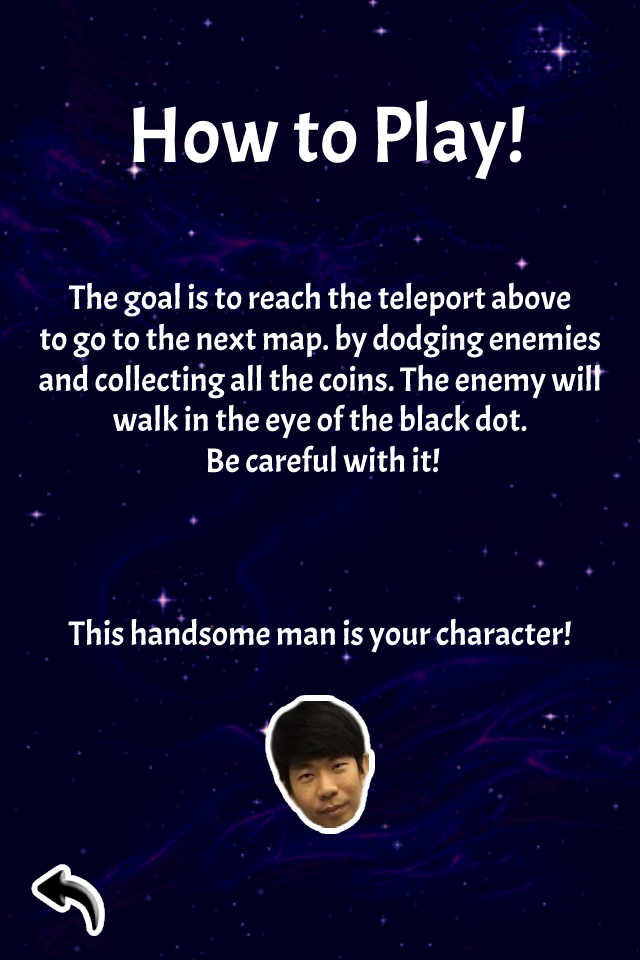
<style>
.page{position:relative;width:640px;height:960px;background:#000020}
.page>*{position:absolute;margin:0}
.t1{font:80px "Acme-Regular";color:#ffffff}
.t2{font:34px "Acme-Regular";color:#ffffff}
</style>
<div class="page">
<p class="t1" style="left:133px;top:100px;width:392px;height:80px">How to Play!</p>
<p class="t2" style="left:39px;top:282px;width:562px;height:191px;text-align:center">The goal is to reach the teleport above<br>to go to the next map. by dodging enemies<br>and collecting all the coins. The enemy will<br>walk in the eye of the black dot.<br> Be careful with it!</p>
<p class="t2" style="left:68px;top:618px;width:503px;height:35px">This handsome man is your character!</p>
</div>
